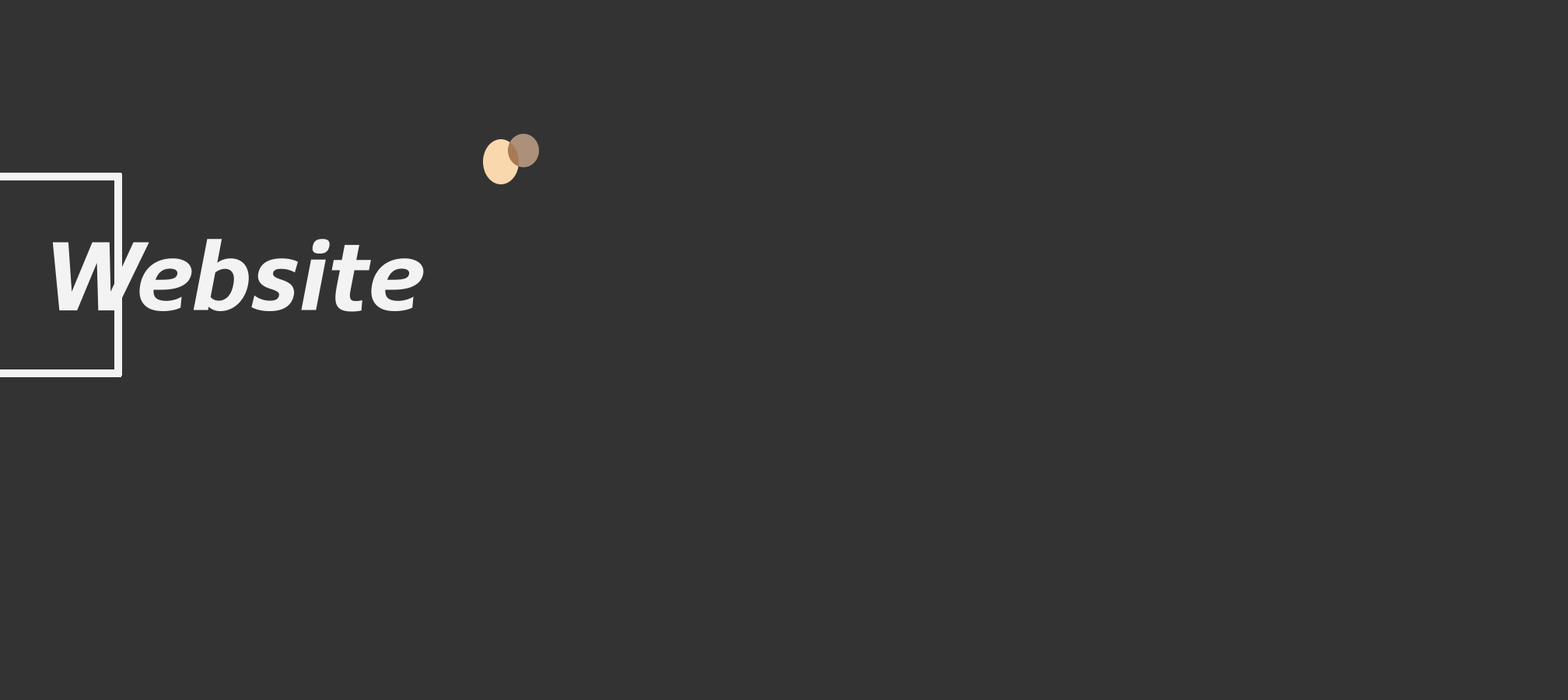
<style>
.page{position:relative;width:1568px;height:700px;background:#333333}
.page>*{position:absolute;margin:0}
.t1{font:97.2px "CoreSansNW01-65BoldItalic";color:#f3f3f3}
</style>
<div class="page">
<p class="t1" style="left:52px;top:239px;width:372px;height:73px">Website</p>
</div>
